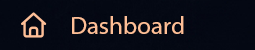
<style>
.page{position:relative;width:255px;height:50px;background:#040813}
.page>*{position:absolute;margin:0}
.t1{font:25px "MyriadPro-Regular";color:#febf97}
</style>
<div class="page">
<p class="t1" style="left:72px;top:16px;width:112px;height:18px">Dashboard</p>
</div>
